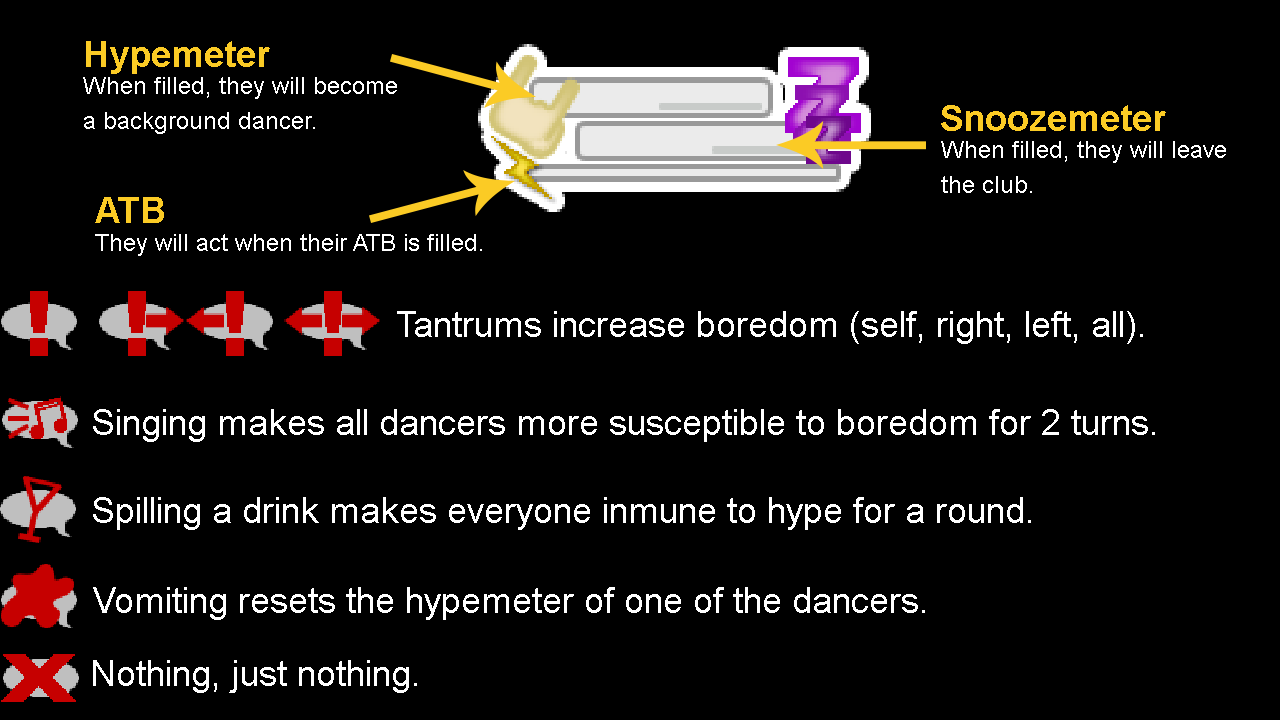
<style>
.page{position:relative;width:1280px;height:720px;background:#000000}
.page>*{position:absolute;margin:0}
.t1{font:36px "Arial-BoldMT";color:#fbcb25}
.t2{font:24px/35px "ArialMT";color:#ffffff}
.t3{font:24px "ArialMT";color:#ffffff}
.t4{font:36px "ArialMT";color:#ffffff}
</style>
<div class="page">
<p class="t1" style="left:86px;top:41px;width:184px;height:33px">Hypemeter</p>
<p class="t2" style="left:83px;top:77px;width:314px;height:57px">When filled, they will become<br>a background dancer.</p>
<p class="t1" style="left:941px;top:105px;width:225px;height:26px">Snoozemeter</p>
<p class="t2" style="left:941px;top:141px;width:285px;height:52px">When filled, they will leave<br>the club.</p>
<p class="t1" style="left:95px;top:197px;width:69px;height:26px">ATB</p>
<p class="t3" style="left:95px;top:234px;width:387px;height:22px">They will act when their ATB is filled.</p>
<p class="t4" style="left:397px;top:311px;width:746px;height:33px">Tantrums increase boredom (self, right, left, all).</p>
<p class="t4" style="left:93px;top:409px;width:1062px;height:33px">Singing makes all dancers more susceptible to boredom for 2 turns.</p>
<p class="t4" style="left:93px;top:497px;width:938px;height:33px">Spilling a drink makes everyone inmune to hype for a round.</p>
<p class="t4" style="left:93px;top:587px;width:832px;height:33px">Vomiting resets the hypemeter of one of the dancers.</p>
<p class="t4" style="left:93px;top:660px;width:324px;height:33px">Nothing, just nothing.</p>
</div>
